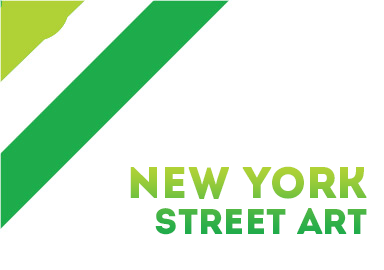
<style>
.page{position:relative;width:384px;height:270px;background:#ffffff}
.page>*{position:absolute;margin:0}
.t1{font:36px/36.1px "Intro"}
.t2{font:44px/36.1px "Intro"}
</style>
<div class="page">
<p class="t1" style="left:130px;top:166px;width:237px;height:69px;text-align:right"><span class="t2">NEW YORK<br></span>STREET ART</p>
</div>
